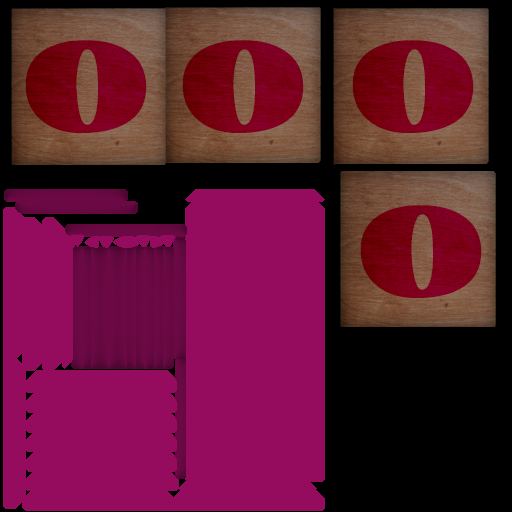
<style>
.page{position:relative;width:512px;height:512px;background:#950c5f}
.page>*{position:absolute;margin:0}
.t1{font:120px "GoudyStout";color:#790015}
.t2{font:120px "GoudyStout";color:#790016}
.t3{font:120px "GoudyStout";color:#7a0016}
</style>
<div class="page">
<p class="t1" style="left:25px;top:40px;width:122px;height:93px">O</p>
<p class="t1" style="left:182px;top:40px;width:122px;height:93px">O</p>
<p class="t2" style="left:352px;top:40px;width:122px;height:93px">O</p>
<p class="t3" style="left:360px;top:205px;width:122px;height:93px">O</p>
</div>
